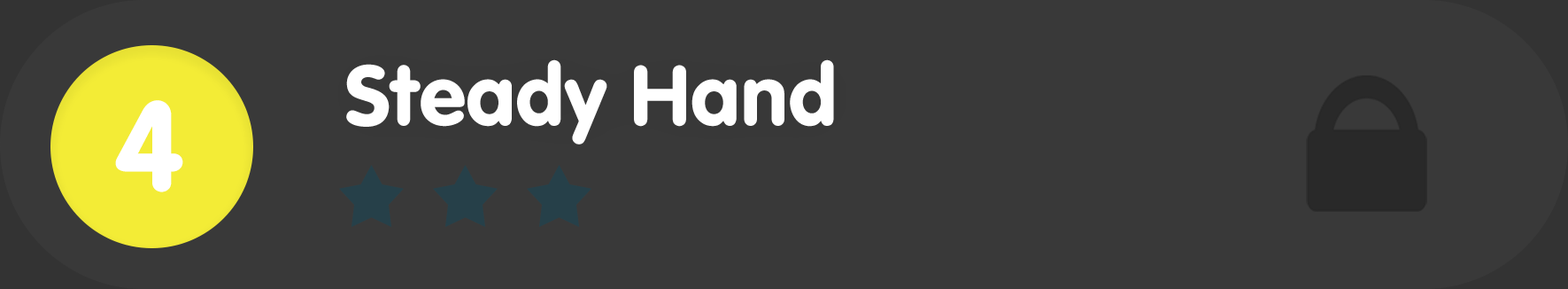
<style>
.page{position:relative;width:1568px;height:289px;background:#393939}
.page>*{position:absolute;margin:0}
.t1{font:88.5px "VAGRundschriftD";color:#ffffff}
.t2{font:132.8px "VAGRundschriftD";color:#ffffff}
</style>
<div class="page">
<p class="t1" style="left:346px;top:59px;width:488px;height:85px">Steady Hand</p>
<p class="t2" style="left:115px;top:100px;width:68px;height:92px">4</p>
</div>
